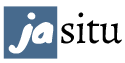
<style>
.page{position:relative;width:125px;height:63px;background:#ffffff}
.page>*{position:absolute;margin:0}
.t1{font:41px "Knewave";color:#ffffff}
.t2{font:42.8px "Alegreya-Regular";letter-spacing:-0.025em;color:#000000}
</style>
<div class="page">
<p class="t1" style="left:8px;top:12px;width:46px;height:42px">ja</p>
<p class="t2" style="left:61px;top:12px;width:61px;height:32px">situ</p>
</div>
